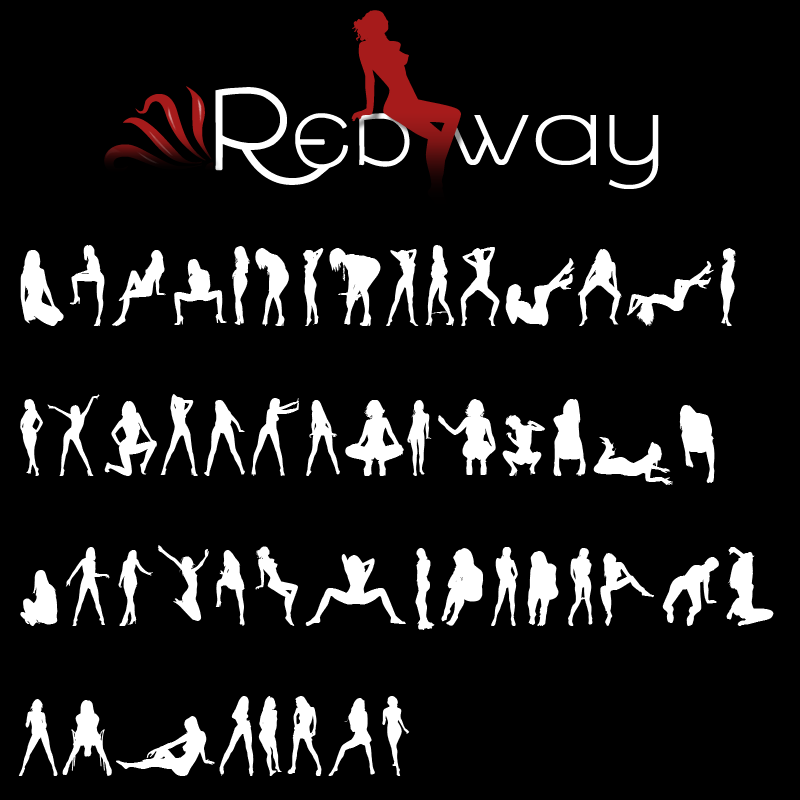
<style>
.page{position:relative;width:800px;height:800px;background:#000000}
.page>*{position:absolute;margin:0}
.t1{font:255.1px "SEXYSPANISHERASMUSGIRLSV20";letter-spacing:0.05em;color:#a61b1b;font-weight:bold}
.t2{font:121.6px "P-Regular"}
.t3{font:157px "VTKSclean";letter-spacing:0.025em;color:#ffffff;font-variant:small-caps;font-weight:bold}
.t4{font:157px "VTKSclean";letter-spacing:0.025em;color:#ffffff;text-transform:uppercase;font-weight:bold}
.t5{font:126.3px "AsenineWide";letter-spacing:0.01em;color:#ffffff;scale:0.8 1}
.t6{font:126.3px "AsenineWide";letter-spacing:0.075em;color:#ffffff;scale:0.8 1}
.t7{font:126.3px "AsenineWide";letter-spacing:0.05em;color:#ffffff;scale:0.8 1}
.t8{font:100px/150px "SEXYSPANISHERASMUSGIRLSV20";color:#ffffff}
</style>
<div class="page">
<p class="t1" style="left:351px;top:10px;width:110px;height:204px">q</p>
<p class="t2" style="left:104px;top:86px;width:110px;height:88px">a</p>
<p class="t3" style="left:215px;top:87px;width:195px;height:98px"><span class="t4">R</span>ed</p>
<p class="t5" style="left:445px;top:115px;width:214px;height:74px">w<span class="t6">a</span><span class="t7">y</span></p>
<p class="t8" style="left:18px;top:245px;width:756px;height:531px">AaBbCcDdEeFfGgH<br>IhJiKjLkMlNmOn<br>PoQpRqSrTsUtVuX<br>vWxYwZyz</p>
</div>
